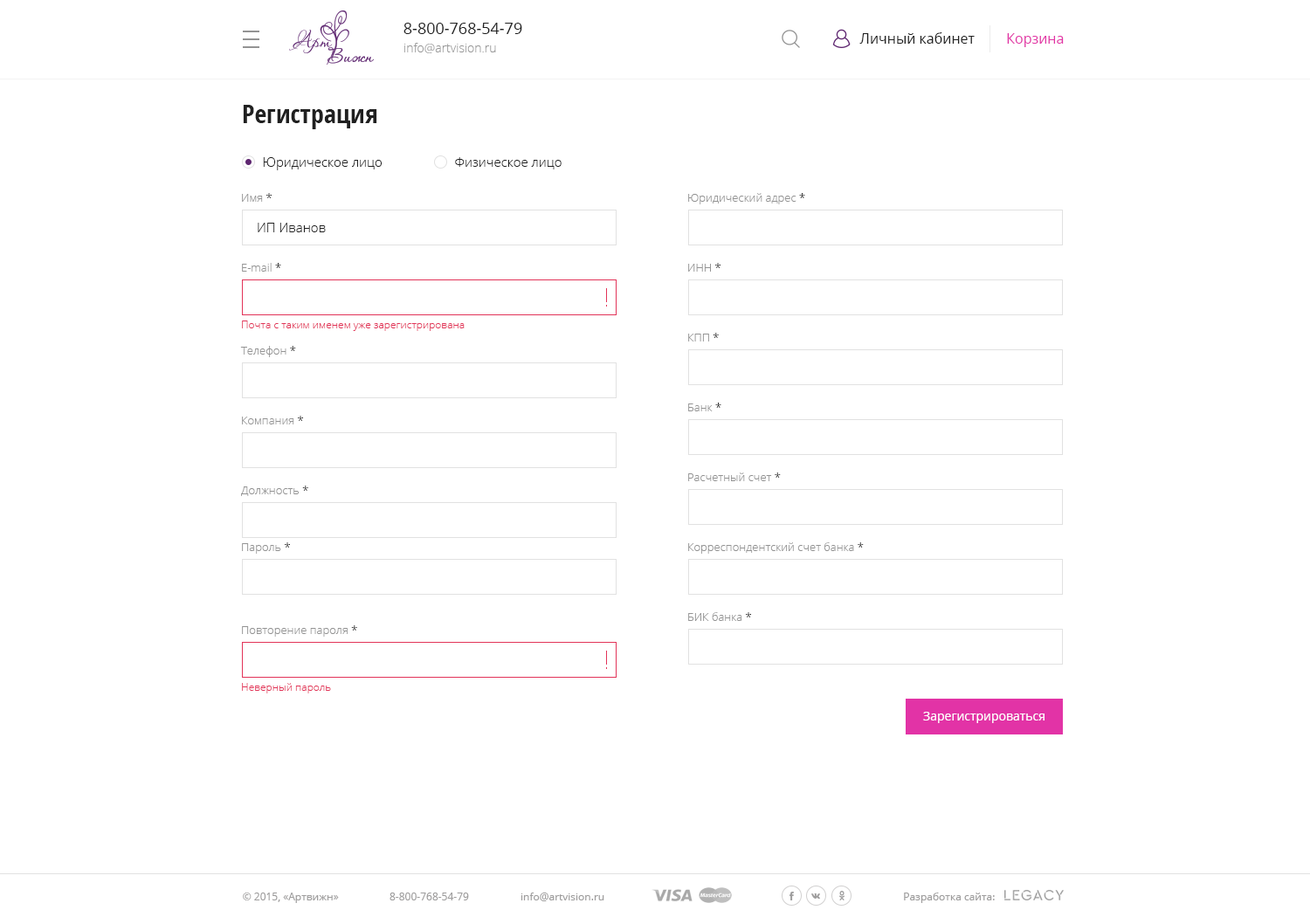
<style>
.page{position:relative;width:1310px;height:910px;background:#ffffff}
.page>*{position:absolute;margin:0}
.t1{font:15.7px "OpenSans";color:#202020}
.t2{font:14px "OpenSans";color:#202020}
.t3{font:14px "OpenSans";color:#e233a6}
.t4{font:12.2px "OpenSans-Light";color:#999999}
.t5{font:26.2px "OpenSans-CondensedBold";color:#202020}
.t6{font:13.1px "OpenSans-Light";color:#202020}
.t7{font:11.4px "OpenSans-Light";color:#939393}
.t8{font:11.4px "OpenSans-Light";color:#202020}
.t9{font:10.5px "OpenSans-Light";color:#e23358}
.t10{font:12.2px "OpenSans";color:#ffffff}
.t11{font:10.5px "OpenSans";color:#9e9d9d}
</style>
<div class="page">
<p class="t1" style="left:404px;top:23px;width:118px;height:11px">8-800-768-54-79</p>
<p class="t2" style="left:859px;top:32px;width:116px;height:12px">Личный кабинет</p>
<p class="t3" style="left:1007px;top:33px;width:57px;height:14px">Корзина</p>
<p class="t4" style="left:404px;top:43px;width:92px;height:10px">info@artvision.ru</p>
<p class="t5" style="left:243px;top:105px;width:134px;height:24px">Регистрация</p>
<p class="t6" style="left:263px;top:157px;width:119px;height:13px">Юридическое лицо</p>
<p class="t6" style="left:455px;top:157px;width:107px;height:12px">Физическое лицо</p>
<p class="t7" style="left:242px;top:193px;width:30px;height:9px">Имя <span class="t8">*</span></p>
<p class="t7" style="left:688px;top:193px;width:117px;height:11px">Юридический адрес <span class="t8">*</span></p>
<p class="t6" style="left:258px;top:223px;width:68px;height:9px">ИП Иванов</p>
<p class="t7" style="left:242px;top:263px;width:39px;height:9px">E-mail <span class="t8">*</span></p>
<p class="t7" style="left:688px;top:263px;width:33px;height:9px">ИНН <span class="t8">*</span></p>
<p class="t9" style="left:242px;top:321px;width:223px;height:10px">Почта с таким именем уже зарегистрирована</p>
<p class="t7" style="left:688px;top:333px;width:31px;height:9px">КПП <span class="t8">*</span></p>
<p class="t7" style="left:240px;top:346px;width:56px;height:11px">Телефон <span class="t8">*</span></p>
<p class="t7" style="left:688px;top:403px;width:33px;height:8px">Банк <span class="t8">*</span></p>
<p class="t7" style="left:242px;top:416px;width:61px;height:8px">Компания <span class="t8">*</span></p>
<p class="t7" style="left:688px;top:473px;width:93px;height:8px">Расчетный счет <span class="t8">*</span></p>
<p class="t7" style="left:241px;top:486px;width:67px;height:10px">Должность <span class="t8">*</span></p>
<p class="t7" style="left:242px;top:542px;width:48px;height:12px">Пароль <span class="t8">*</span></p>
<p class="t7" style="left:688px;top:542px;width:176px;height:12px">Корреспондентский счет банка <span class="t8">*</span></p>
<p class="t7" style="left:688px;top:612px;width:63px;height:9px">БИК банка <span class="t8">*</span></p>
<p class="t7" style="left:242px;top:625px;width:115px;height:12px">Повторение пароля <span class="t8">*</span></p>
<p class="t9" style="left:242px;top:683px;width:89px;height:11px">Неверный пароль</p>
<p class="t10" style="left:923px;top:712px;width:122px;height:11px">Зарегистрироваться</p>
<p class="t11" style="left:243px;top:893px;width:96px;height:10px">© 2015, «Артвижн»</p>
<p class="t11" style="left:390px;top:893px;width:79px;height:8px">8-800-768-54-79</p>
<p class="t11" style="left:521px;top:893px;width:83px;height:8px">info@artvision.ru</p>
<p class="t11" style="left:904px;top:893px;width:91px;height:10px">Разработка сайта:</p>
</div>
